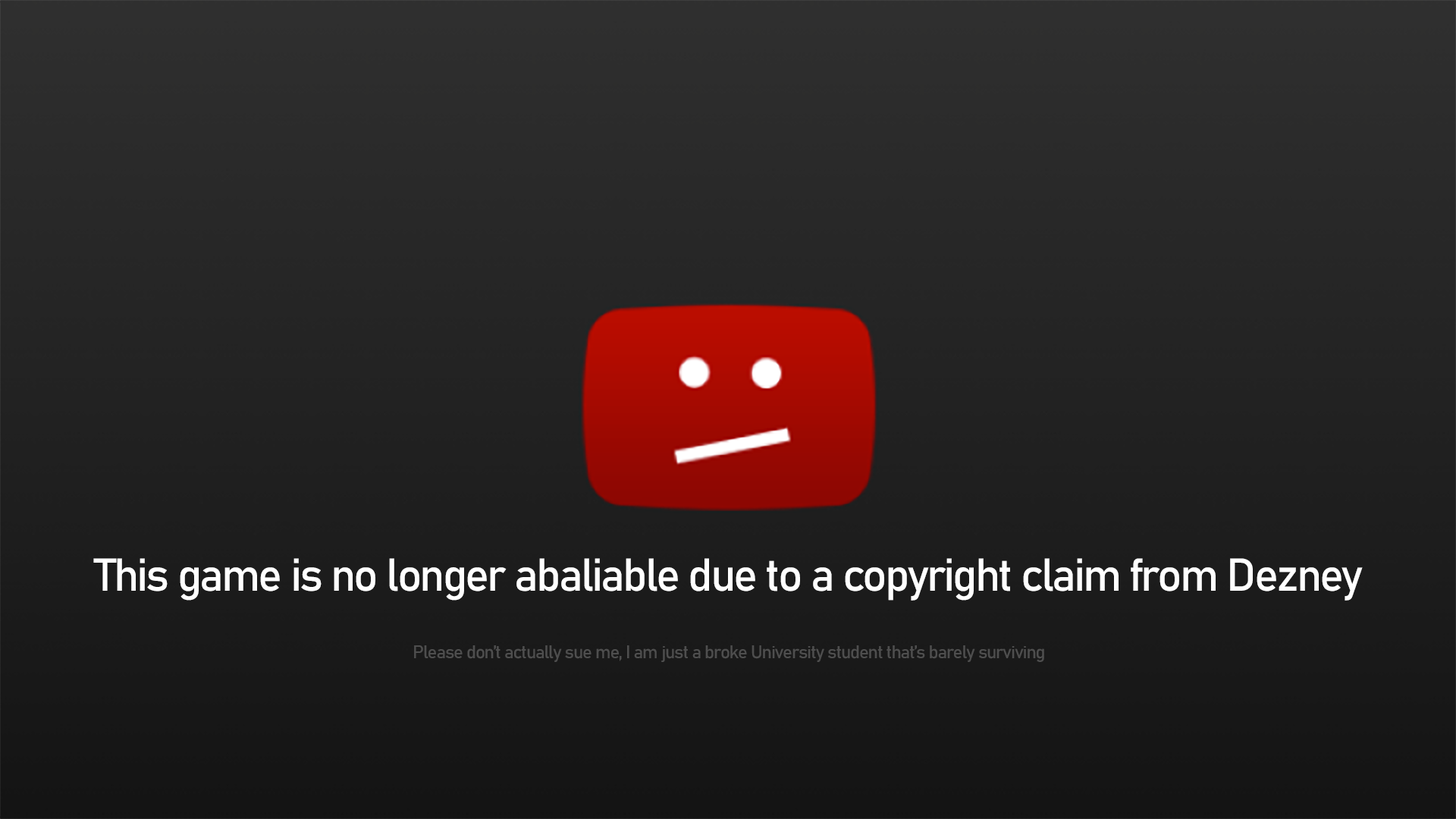
<style>
.page{position:relative;width:1456px;height:819px}
.page>*{position:absolute;margin:0}
.t1{font:45.5px "Bahnschrift";letter-spacing:-0.05em;color:#ffffff}
.t2{font:18.2px "Bahnschrift";letter-spacing:-0.05em;color:#4e4e4e}
</style>
<div class="page">
<p class="t1" style="left:93px;top:558px;width:1270px;height:43px">This game is no longer abaliable due to a copyright claim from Dezney</p>
<p class="t2" style="left:414px;top:645px;width:630px;height:17px">Please don’t actually sue me, I am just a broke University student that’s barely surviving</p>
</div>
